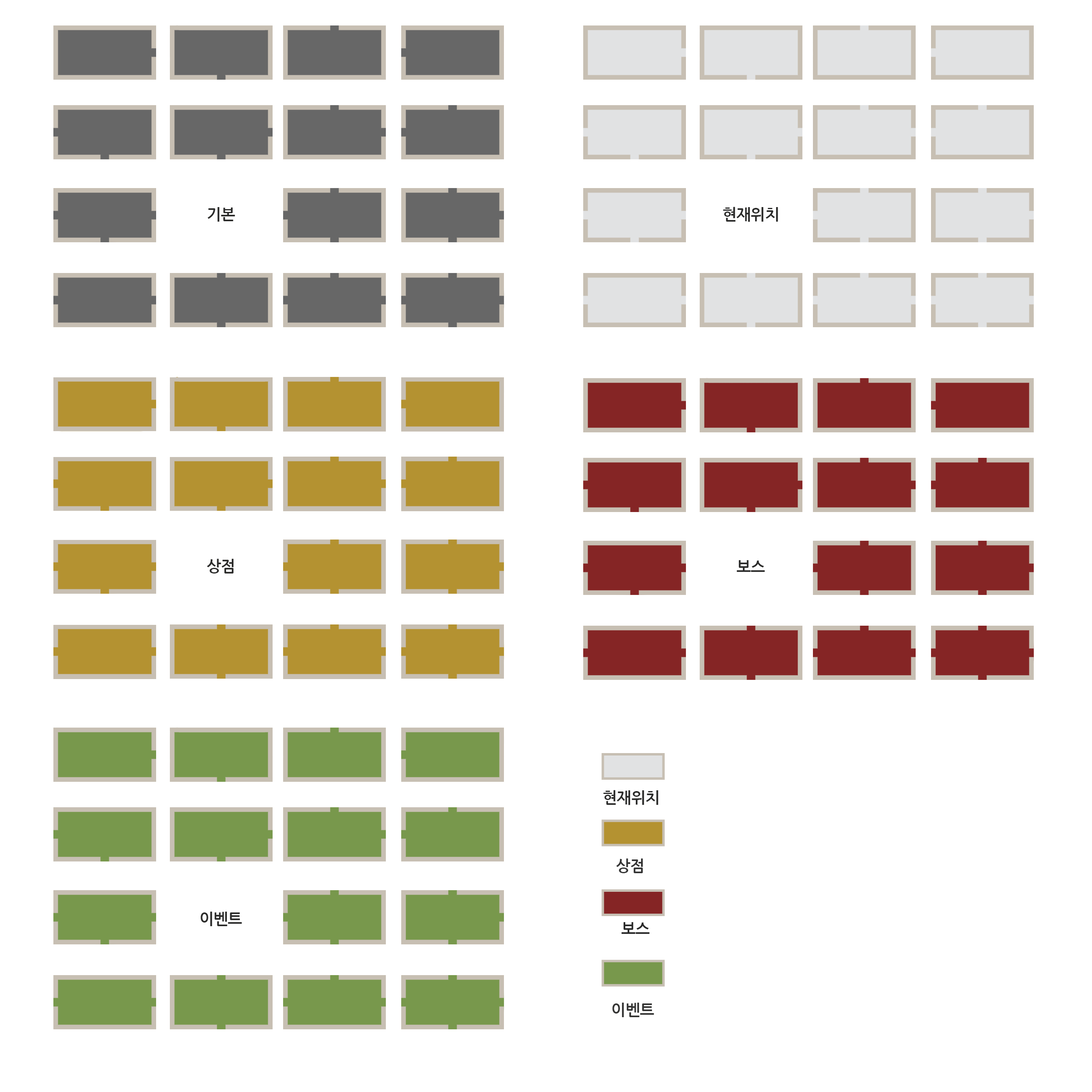
<style>
.page{position:relative;width:1092px;height:1092px;background:#ffffff}
.page>*{position:absolute;margin:0}
.t1{font:15.2px "NanumGothicBold";color:#2c2c2b}
.t2{font:15.2px "NanumGothicBold";color:#343434}
.t3{font:15.2px "NanumGothicBold";color:#282828}
.t4{font:15.2px "NanumGothicBold";color:#353534}
</style>
<div class="page">
<p class="t1" style="left:207px;top:207px;width:28px;height:15px">기본</p>
<p class="t1" style="left:723px;top:207px;width:55px;height:15px">현재위치</p>
<p class="t1" style="left:207px;top:559px;width:27px;height:14px">상점</p>
<p class="t1" style="left:736px;top:560px;width:29px;height:12px">보스</p>
<p class="t1" style="left:603px;top:790px;width:55px;height:15px">현재위치</p>
<p class="t2" style="left:616px;top:858px;width:27px;height:15px">상점</p>
<p class="t1" style="left:201px;top:912px;width:41px;height:14px">이벤트</p>
<p class="t3" style="left:621px;top:922px;width:29px;height:12px">보스</p>
<p class="t4" style="left:612px;top:1003px;width:42px;height:14px">이벤트</p>
</div>
